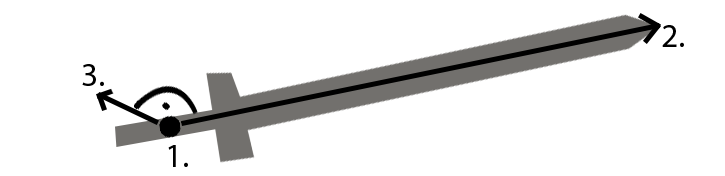
<style>
.page{position:relative;width:725px;height:176px;background:#ffffff}
.page>*{position:absolute;margin:0}
.t1{font:33.3px "MyriadPro-Regular";color:#000000}
</style>
<div class="page">
<p class="t1" style="left:662px;top:25px;width:22px;height:22px">2.</p>
<p class="t1" style="left:82px;top:64px;width:22px;height:22px">3.</p>
<p class="t1" style="left:168px;top:145px;width:20px;height:22px">1.</p>
</div>
